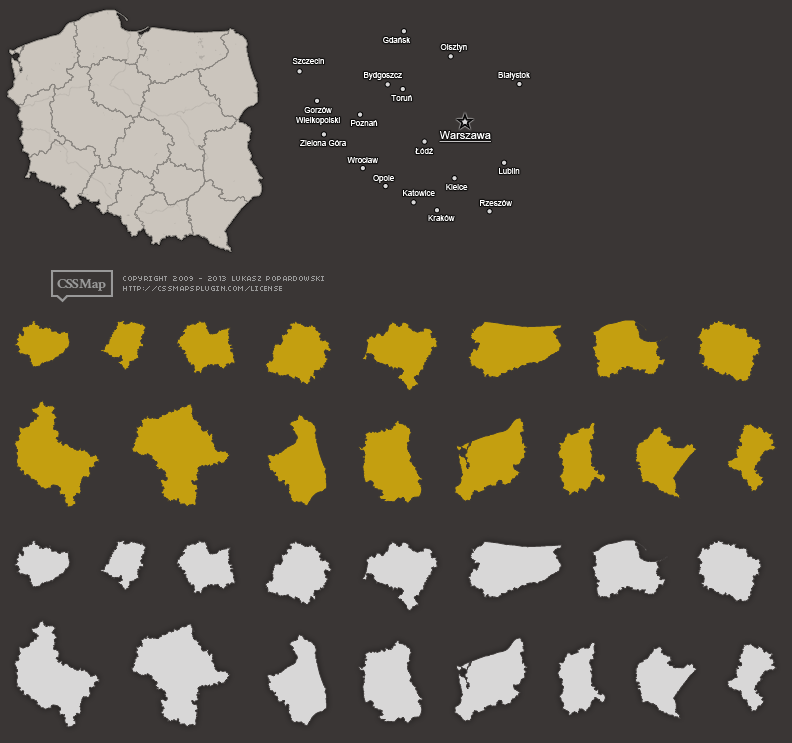
<style>
.page{position:relative;width:792px;height:743px;background:#3a3635}
.page>*{position:absolute;margin:0}
.t1{font:8px "ArialMT";color:#ffffff}
.t2{font:11px "ArialMT";color:#ffffff;text-decoration:underline}
</style>
<div class="page">
<p class="t1" style="left:383px;top:37px;width:28px;height:6px">Gdańsk</p>
<p class="t1" style="left:440px;top:43px;width:27px;height:9px">Olsztyn</p>
<p class="t1" style="left:292px;top:58px;width:32px;height:6px">Szczecin</p>
<p class="t1" style="left:364px;top:72px;width:38px;height:8px">Bydgoszcz</p>
<p class="t1" style="left:498px;top:71px;width:32px;height:9px">Białystok</p>
<p class="t1" style="left:391px;top:95px;width:21px;height:6px">Toruń</p>
<p class="t1" style="left:296px;top:107px;width:44px;height:18px;text-align:center">Gorzów<br>Wielkopolski</p>
<p class="t1" style="left:351px;top:120px;width:27px;height:6px">Poznań</p>
<p class="t2" style="left:439px;top:131px;width:52px;height:11px">Warszawa</p>
<p class="t1" style="left:300px;top:140px;width:46px;height:6px">Zielona Góra</p>
<p class="t1" style="left:415px;top:148px;width:18px;height:6px">Łódź</p>
<p class="t1" style="left:347px;top:157px;width:31px;height:6px">Wrocław</p>
<p class="t1" style="left:499px;top:168px;width:21px;height:6px">Lublin</p>
<p class="t1" style="left:373px;top:175px;width:21px;height:8px">Opole</p>
<p class="t1" style="left:446px;top:184px;width:22px;height:6px">Kielce</p>
<p class="t1" style="left:403px;top:189px;width:32px;height:7px">Katowice</p>
<p class="t1" style="left:480px;top:200px;width:32px;height:6px">Rzeszów</p>
<p class="t1" style="left:428px;top:215px;width:27px;height:6px">Kraków</p>
</div>
